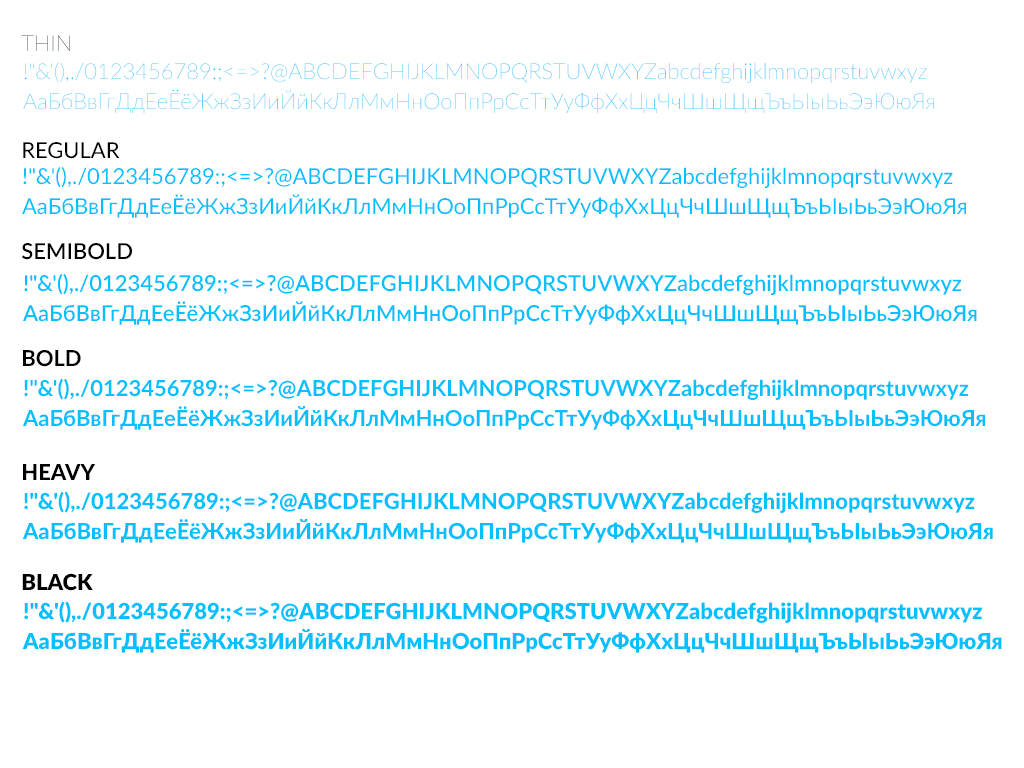
<style>
.page{position:relative;width:1024px;height:768px;background:#ffffff}
.page>*{position:absolute;margin:0}
.t1{font:22px "Lato-Thin"}
.t2{font:22px/30px "Lato-Thin";color:#04c0ff}
.t3{font:22px "Lato-Regular";color:#000000}
.t4{font:22px/30px "Lato-Regular";color:#04c0ff}
.t5{font:22px "Lato-Semibold";color:#000000}
.t6{font:22px/30px "Lato-Semibold";color:#04c0ff}
.t7{font:22px "Lato-Bold";color:#000000}
.t8{font:22px/30px "Lato-Bold";color:#04c0ff}
.t9{font:22px "Lato-Heavy";color:#000000}
.t10{font:22px/30px "Lato-Heavy";color:#04c0ff}
.t11{font:22px "Lato-Black";color:#000000}
.t12{font:22px/30px "Lato-Black";color:#04c0ff}
</style>
<div class="page">
<p class="t1" style="left:21px;top:35px;width:49px;height:16px">THIN</p>
<p class="t2" style="left:23px;top:62px;width:911px;height:51px">!"&amp;'(),./0123456789:;&lt;=&gt;?@ABCDEFGHIJKLMNOPQRSTUVWXYZabcdefghijklmnopqrstuvwxyz<br>АаБбВвГгДдЕеЁёЖжЗзИиЙйКкЛлМмНнОоПпРрСсТтУуФфХхЦцЧчШшЩщЪъЫыЬьЭэЮюЯя</p>
<p class="t3" style="left:23px;top:142px;width:97px;height:17px">REGULAR</p>
<p class="t4" style="left:22px;top:167px;width:944px;height:51px">!"&amp;'(),./0123456789:;&lt;=&gt;?@ABCDEFGHIJKLMNOPQRSTUVWXYZabcdefghijklmnopqrstuvwxyz<br>АаБбВвГгДдЕеЁёЖжЗзИиЙйКкЛлМмНнОоПпРрСсТтУуФфХхЦцЧчШшЩщЪъЫыЬьЭэЮюЯя</p>
<p class="t5" style="left:22px;top:243px;width:110px;height:17px">SEMIBOLD</p>
<p class="t6" style="left:23px;top:274px;width:954px;height:51px">!"&amp;'(),./0123456789:;&lt;=&gt;?@ABCDEFGHIJKLMNOPQRSTUVWXYZabcdefghijklmnopqrstuvwxyz<br>АаБбВвГгДдЕеЁёЖжЗзИиЙйКкЛлМмНнОоПпРрСсТтУуФфХхЦцЧчШшЩщЪъЫыЬьЭэЮюЯя</p>
<p class="t7" style="left:23px;top:350px;width:58px;height:17px">BOLD</p>
<p class="t8" style="left:23px;top:378px;width:962px;height:52px">!"&amp;'(),./0123456789:;&lt;=&gt;?@ABCDEFGHIJKLMNOPQRSTUVWXYZabcdefghijklmnopqrstuvwxyz<br>АаБбВвГгДдЕеЁёЖжЗзИиЙйКкЛлМмНнОоПпРрСсТтУуФфХхЦцЧчШшЩщЪъЫыЬьЭэЮюЯя</p>
<p class="t9" style="left:23px;top:464px;width:73px;height:16px">HEAVY</p>
<p class="t10" style="left:22px;top:491px;width:971px;height:52px">!"&amp;'(),./0123456789:;&lt;=&gt;?@ABCDEFGHIJKLMNOPQRSTUVWXYZabcdefghijklmnopqrstuvwxyz<br>АаБбВвГгДдЕеЁёЖжЗзИиЙйКкЛлМмНнОоПпРрСсТтУуФфХхЦцЧчШшЩщЪъЫыЬьЭэЮюЯя</p>
<p class="t11" style="left:22px;top:573px;width:71px;height:18px">BLACK</p>
<p class="t12" style="left:22px;top:601px;width:980px;height:52px">!"&amp;'(),./0123456789:;&lt;=&gt;?@ABCDEFGHIJKLMNOPQRSTUVWXYZabcdefghijklmnopqrstuvwxyz<br>АаБбВвГгДдЕеЁёЖжЗзИиЙйКкЛлМмНнОоПпРрСсТтУуФфХхЦцЧчШшЩщЪъЫыЬьЭэЮюЯя</p>
</div>
